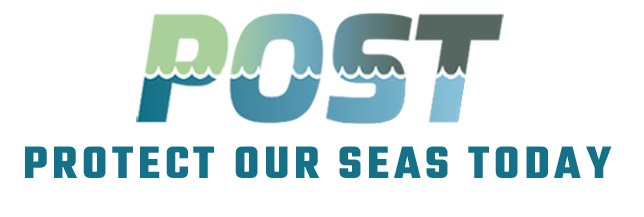
<style>
.page{position:relative;width:644px;height:217px;background:#ffffff}
.page>*{position:absolute;margin:0}
.t1{font:49px "Teko-Bold";letter-spacing:0.095em;color:#147187;text-transform:uppercase}
</style>
<div class="page">
<p class="t1" style="left:25px;top:146px;width:587px;height:32px">Protect Our Seas Today</p>
</div>
